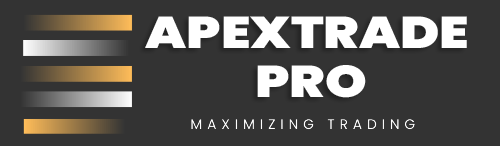
<style>
.page{position:relative;width:500px;height:146px;background:#333333}
.page>*{position:absolute;margin:0}
.t1{font:44.5px "Poppins-Black";color:#ffffff;text-transform:uppercase;scale:1.19 1}
</style>
<div class="page">
<p class="t1" style="left:145px;top:16px;width:322px;height:32px">Apextrade</p>
<p class="t1" style="left:257px;top:65px;width:109px;height:33px">pro</p>
</div>
